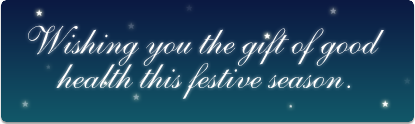
<style>
.page{position:relative;width:415px;height:124px}
.page>*{position:absolute;margin:0}
.t1{font:39.4px/34.5px "Shelley-AllegroScript";color:#ffffff}
</style>
<div class="page">
<p class="t1" style="left:28px;top:25px;width:356px;height:74px;text-align:center">Wishing you the gift of good <br>health this festive season.</p>
</div>
